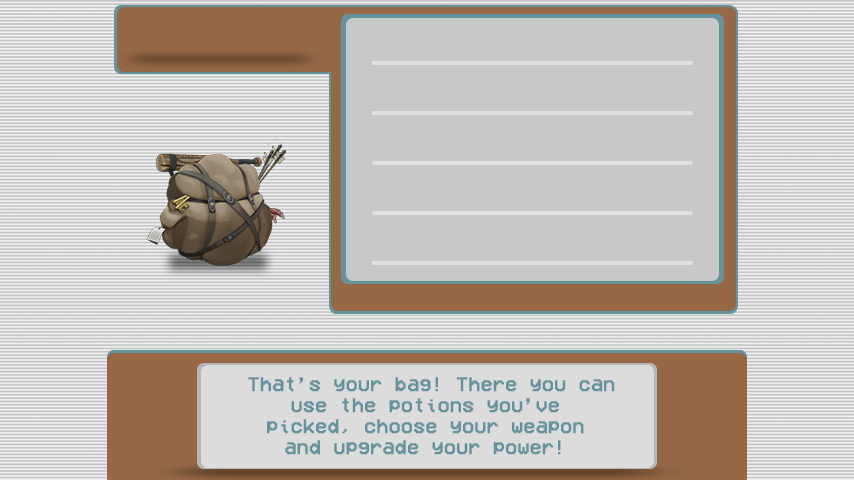
<style>
.page{position:relative;width:854px;height:480px;background:#c8c8c8}
.page>*{position:absolute;margin:0}
.t1{font:20px/21px "VCROSDMono";color:#64939b;font-weight:bold}
</style>
<div class="page">
<p class="t1" style="left:248px;top:377px;width:367px;height:78px;text-align:center">That’s your bag! There you can<br>use the potions you’ve <br>picked, choose your weapon <br>and upgrade your power!</p>
</div>
